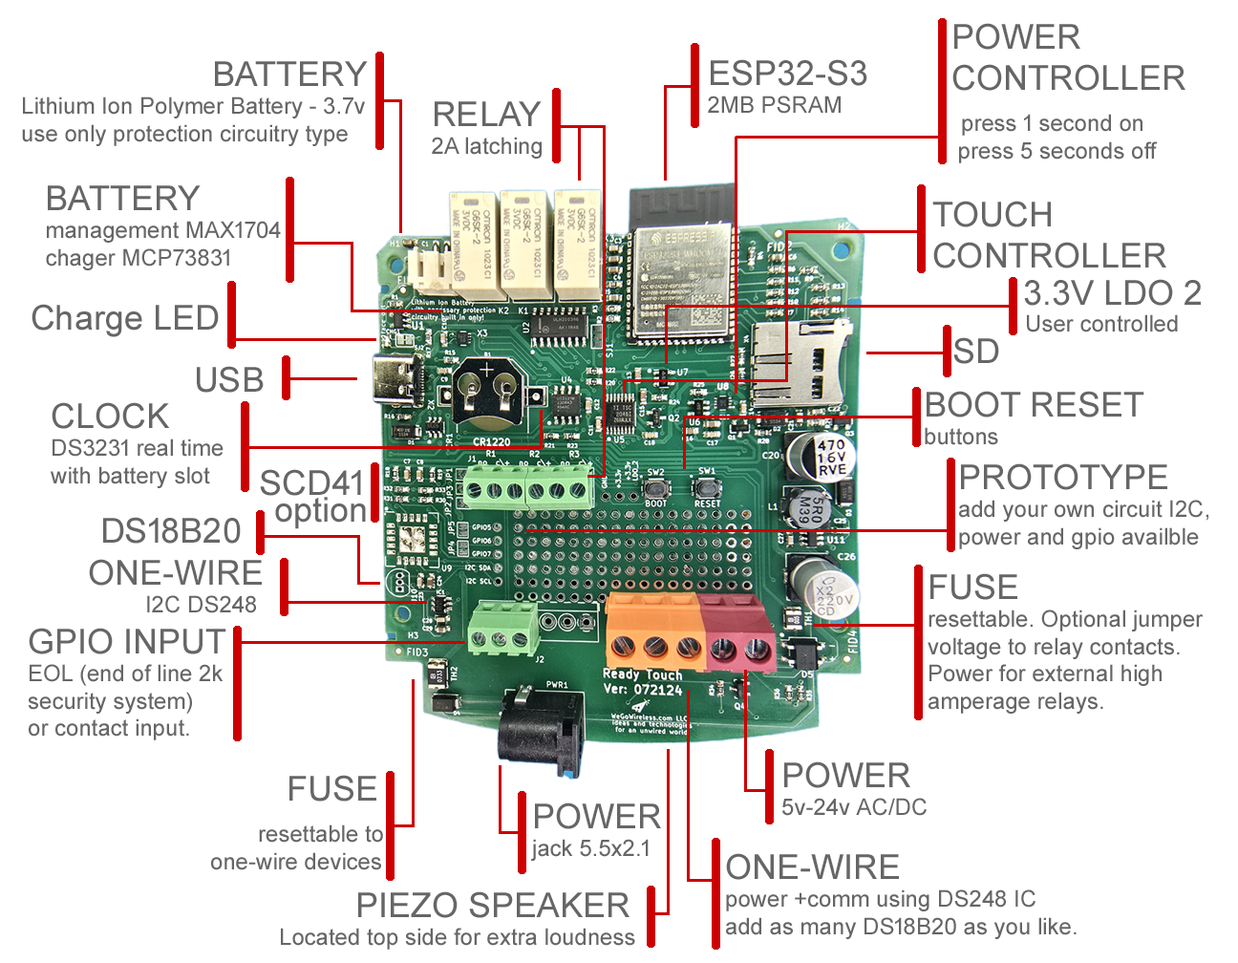
<style>
.page{position:relative;width:1238px;height:963px;background:#ffffff}
.page>*{position:absolute;margin:0}
.t1{font:22.9px "ArialMT";color:#666666}
.t2{font:34.4px "ArialMT";color:#666666}
</style>
<div class="page">
<p class="t1" style="left:953px;top:23px;width:233px;height:140px"><span class="t2">POWER<br>CONTROLLER<br> </span>press 1 second on<br> press 5 seconds off</p>
<p class="t1" style="left:22px;top:61px;width:346px;height:85px"><span class="t2">                    BATTERY<br></span>Lithium Ion Polymer Battery - 3.7v<br>use only protection circuitry type</p>
<p class="t1" style="left:708px;top:59px;width:160px;height:55px"><span class="t2">ESP32-S3</span><br>2MB PSRAM</p>
<p class="t1" style="left:432px;top:101px;width:110px;height:58px"><span class="t2">RELAY<br></span>2A latching</p>
<p class="t1" style="left:46px;top:185px;width:235px;height:85px"><span class="t2">BATTERY<br></span>management MAX1704<br>chager MCP73831</p>
<p class="t2" style="left:932px;top:201px;width:235px;height:67px">TOUCH<br>CONTROLLER</p>
<p class="t2" style="left:1024px;top:279px;width:177px;height:27px">3.3V LDO 2</p>
<p class="t2" style="left:32px;top:304px;width:187px;height:33px">Charge LED</p>
<p class="t1" style="left:1027px;top:314px;width:151px;height:18px">User controlled</p>
<p class="t2" style="left:953px;top:337px;width:46px;height:27px">SD</p>
<p class="t2" style="left:197px;top:366px;width:67px;height:27px">USB</p>
<p class="t2" style="left:925px;top:391px;width:220px;height:54px">BOOT RESET<span class="t1"><br>buttons</span></p>
<p class="t1" style="left:51px;top:402px;width:173px;height:86px"><span class="t2">CLOCK<br></span>DS3231 real time<br>with battery slot</p>
<p class="t2" style="left:260px;top:469px;width:101px;height:27px">SCD41</p>
<p class="t1" style="left:959px;top:463px;width:250px;height:86px"><span class="t2">PROTOTYPE</span><br>add your own circuit I2C,<br>power and gpio availble</p>
<p class="t2" style="left:275px;top:497px;width:91px;height:32px">option</p>
<p class="t2" style="left:103px;top:517px;width:138px;height:27px">DS18B20</p>
<p class="t1" style="left:89px;top:559px;width:173px;height:54px"><span class="t2">ONE-WIRE</span><br>         I2C DS248</p>
<p class="t1" style="left:928px;top:573px;width:276px;height:141px"><span class="t2">FUSE<br></span>resettable. Optional jumper<br>voltage to relay contacts.<br>Power for external high<br>amperage relays.</p>
<p class="t1" style="left:28px;top:628px;width:198px;height:112px"><span class="t2">GPIO INPUT<br></span>EOL (end of line 2k <br>security system)<br>or contact input.</p>
<p class="t1" style="left:782px;top:761px;width:145px;height:55px"><span class="t2">POWER</span><br>5v-24v AC/DC</p>
<p class="t1" style="left:211px;top:775px;width:172px;height:95px"><span class="t2">        FUSE<br>     </span>resettable to<br>one-wire devices</p>
<p class="t1" style="left:531px;top:803px;width:130px;height:58px"><span class="t2">POWER<br></span>jack 5.5x2.1</p>
<p class="t1" style="left:726px;top:853px;width:351px;height:86px"><span class="t2">ONE-WIRE<br></span>power +comm using DS248 IC<br>add as many DS18B20 as you like.</p>
<p class="t1" style="left:281px;top:891px;width:354px;height:59px"><span class="t2">        PIEZO SPEAKER</span><br>Located top side for extra loudness</p>
</div>
